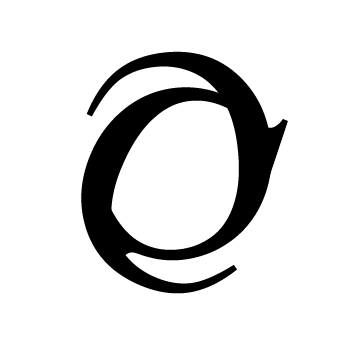
<style>
.page{position:relative;width:352px;height:352px;background:#ffffff}
.page>*{position:absolute;margin:0}
.t1{font:300px "TimesNewRomanPSMT";letter-spacing:0.045em;color:#000000}
</style>
<div class="page">
<p class="t1" style="left:86px;top:51px;width:186px;height:218px;rotate:173deg">C</p>
<p class="t1" style="left:81px;top:87px;width:207px;height:207px;rotate:22deg">C</p>
</div>
